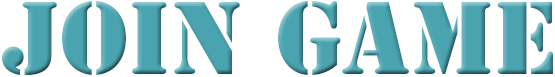
<style>
.page{position:relative;width:555px;height:77px;background:#ffffff}
.page>*{position:absolute;margin:0}
.t1{font:96px "StencilStd";color:#4aa4b0}
</style>
<div class="page">
<p class="t1" style="left:2px;top:1px;width:551px;height:74px">join GAME</p>
</div>
